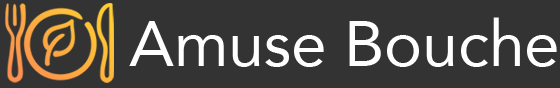
<style>
.page{position:relative;width:560px;height:88px;background:#333333}
.page>*{position:absolute;margin:0}
.t1{font:64px "Avenir-Roman";color:#ffffff}
</style>
<div class="page">
<p class="t1" style="left:129px;top:17px;width:428px;height:50px">Amuse Bouche</p>
</div>
